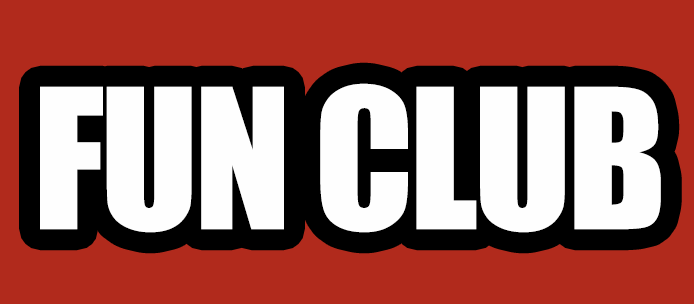
<style>
.page{position:relative;width:694px;height:304px;background:#b12a1c}
.page>*{position:absolute;margin:0}
.t1{font:180px "Impact";letter-spacing:-0.025em;color:#fefefe}
</style>
<div class="page">
<p class="t1" style="left:40px;top:83px;width:621px;height:150px">FUN CLUB</p>
</div>
